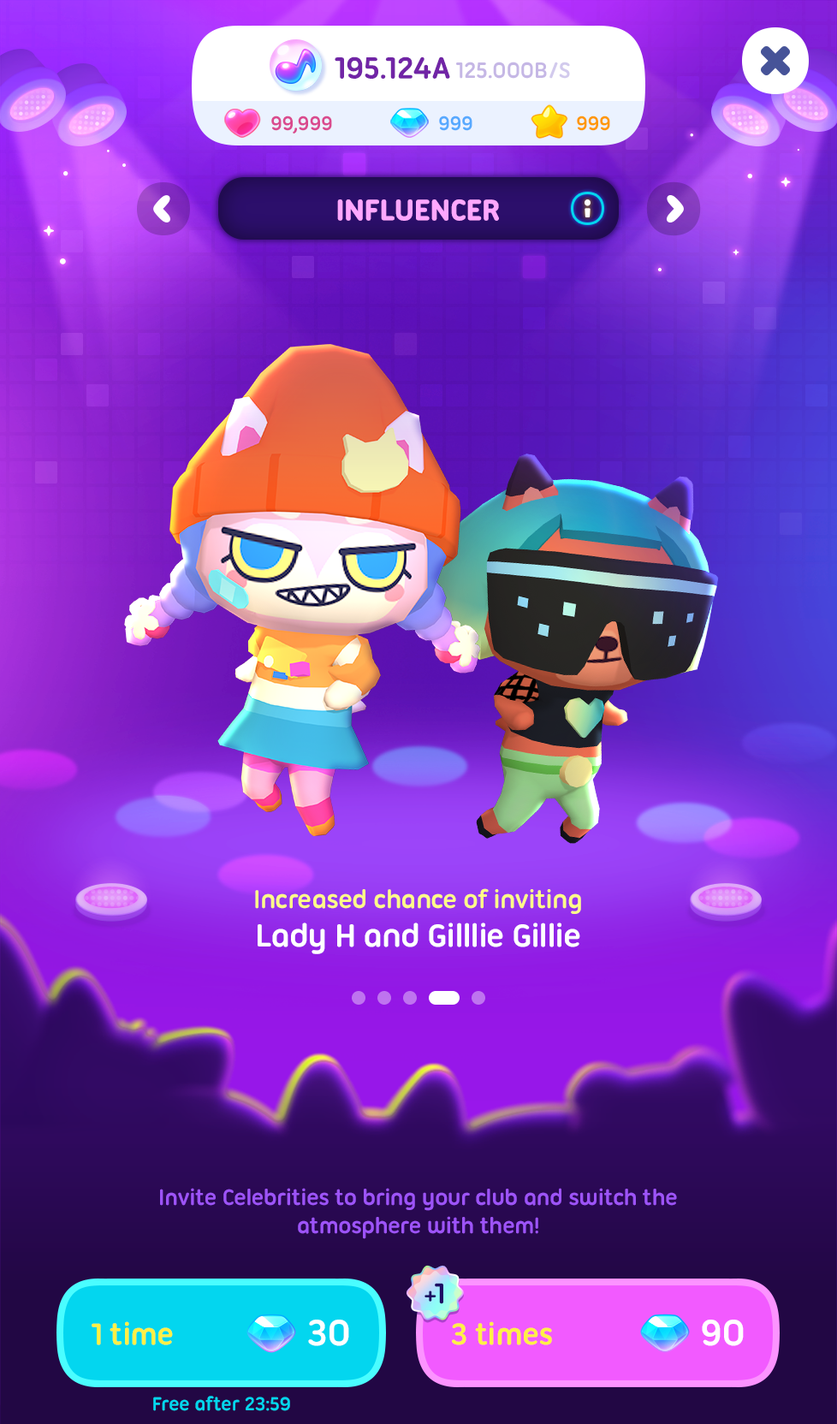
<style>
.page{position:relative;width:837px;height:1424px}
.page>*{position:absolute;margin:0}
.t1{font:30.8px "UbuntuTitling-Bold";letter-spacing:-0.02em;color:#ffa7fe;text-transform:uppercase;font-weight:bold}
.t2{font:27.4px "UbuntuTitling-Bold";letter-spacing:-0.025em;color:#fffb88}
.t3{font:34.2px "UbuntuTitling-Bold";letter-spacing:-0.025em;color:#ffffff}
.t4{font:24px "UbuntuTitling-Bold";letter-spacing:-0.025em;color:#9d53f9}
.t5{font:25px "UbuntuTitling-Bold";letter-spacing:-0.025em;color:#1d0a64}
.t6{font:31.2px "UbuntuTitling-Bold";letter-spacing:-0.025em;color:#1d0a64}
.t7{font:32.5px "UbuntuTitling-Bold";letter-spacing:-0.025em;color:#fff045}
.t8{font:39.4px "UbuntuTitling-Bold";letter-spacing:-0.025em;color:#ffffff}
.t9{font:20.5px "UbuntuTitling-Bold";letter-spacing:-0.025em;color:#03d6ef}
</style>
<div class="page">
<p class="t1" style="left:337px;top:199px;width:162px;height:22px">Influencer</p>
<p class="t2" style="left:255px;top:889px;width:326px;height:25px">Increased chance of inviting</p>
<p class="t3" style="left:258px;top:923px;width:322px;height:31px">Lady H and Gilllie Gillie</p>
<p class="t4" style="left:160px;top:1188px;width:517px;height:51px;text-align:center">Invite Celebrities to bring your club and switch the<br>atmosphere with them!</p>
<p class="t5" style="left:425px;top:1283px;width:18px;height:22px">+<span class="t6">1</span></p>
<p class="t7" style="left:92px;top:1322px;width:81px;height:24px">1 time</p>
<p class="t8" style="left:308px;top:1320px;width:41px;height:26px">30</p>
<p class="t7" style="left:452px;top:1322px;width:100px;height:24px">3 times</p>
<p class="t8" style="left:702px;top:1320px;width:42px;height:26px">90</p>
<p class="t9" style="left:153px;top:1396px;width:137px;height:16px">Free after 23:59</p>
</div>
